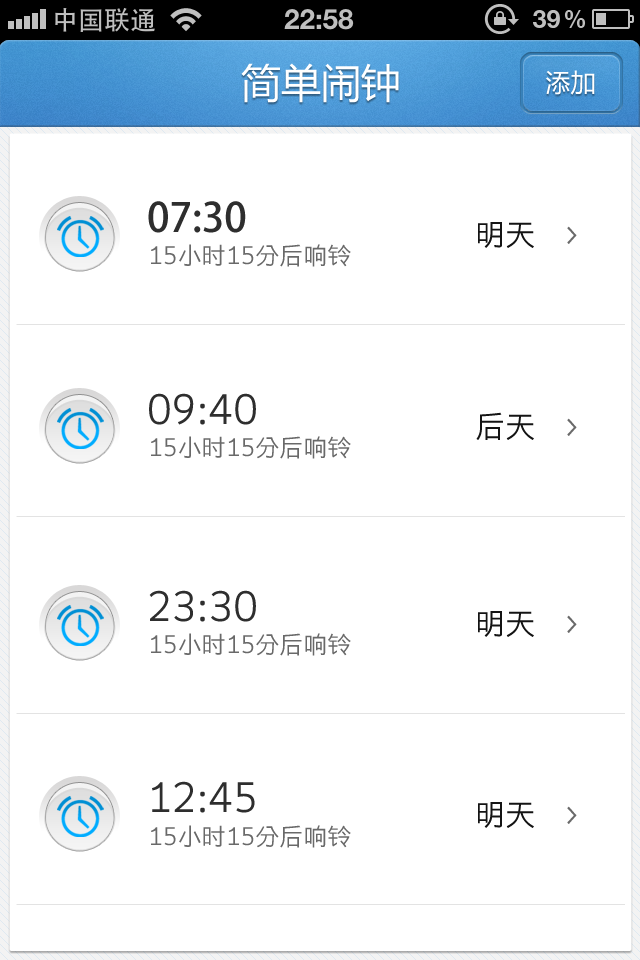
<style>
.page{position:relative;width:640px;height:960px;background:#ffffff}
.page>*{position:absolute;margin:0}
.t1{font:40px "MicrosoftYaHei";color:#ffffff}
.t2{font:25px "MicrosoftYaHei";color:#ffffff}
.t3{font:40px "AdobeHeitiStd-Regular";color:#2e2e2e}
.t4{font:30px "STHeitiK-Light";color:#141414}
.t5{font:30px "STHeitiSC-Light";color:#696969}
.t6{font:24px "STHeitiK-Light";color:#696969}
.t7{font:40px "STHeitiK-Light";color:#2e2e2e}
</style>
<div class="page">
<p class="t1" style="left:241px;top:63px;width:158px;height:40px">简单闹钟</p>
<p class="t2" style="left:546px;top:70px;width:49px;height:25px">添加</p>
<p class="t3" style="left:148px;top:201px;width:98px;height:32px">07:30</p>
<p class="t4" style="left:478px;top:222px;width:56px;height:26px">明天</p>
<p class="t5" style="left:567px;top:226px;width:10px;height:18px">&gt;</p>
<p class="t6" style="left:151px;top:244px;width:200px;height:23px">15小时15分后响铃</p>
<p class="t7" style="left:149px;top:393px;width:107px;height:32px">09:40</p>
<p class="t4" style="left:476px;top:412px;width:58px;height:28px">后天</p>
<p class="t5" style="left:567px;top:418px;width:10px;height:18px">&gt;</p>
<p class="t6" style="left:151px;top:436px;width:200px;height:23px">15小时15分后响铃</p>
<p class="t7" style="left:149px;top:590px;width:107px;height:32px">23:30</p>
<p class="t4" style="left:478px;top:611px;width:56px;height:26px">明天</p>
<p class="t5" style="left:567px;top:615px;width:10px;height:18px">&gt;</p>
<p class="t6" style="left:151px;top:633px;width:200px;height:23px">15小时15分后响铃</p>
<p class="t7" style="left:152px;top:781px;width:103px;height:32px">12:45</p>
<p class="t4" style="left:478px;top:802px;width:56px;height:26px">明天</p>
<p class="t5" style="left:567px;top:806px;width:10px;height:18px">&gt;</p>
<p class="t6" style="left:151px;top:825px;width:200px;height:23px">15小时15分后响铃</p>
</div>
